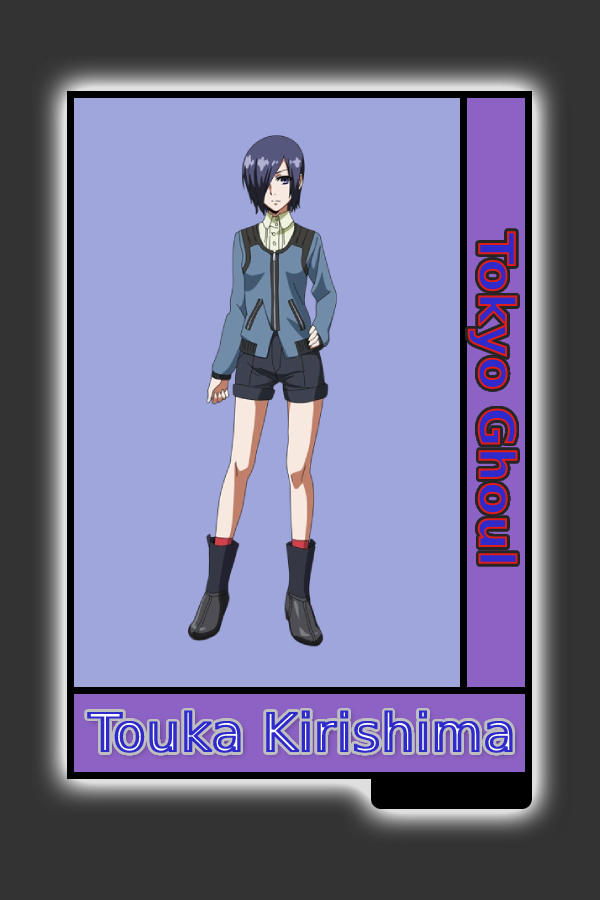
<style>
.page{position:relative;width:600px;height:900px;background:#9ea6db}
.page>*{position:absolute;margin:0}
.t1{font:48.8px "MADETOMMY-Bold"}
.t2{font:52px "CoolveticaRg-Regular";font-weight:bold}
</style>
<div class="page">
<p class="t1" style="left:467px;top:231px;width:51px;height:333px;rotate:90deg">Tokyo Ghoul</p>
<p class="t2" style="left:87px;top:710px;width:426px;height:43px">Touka Kirishima</p>
</div>
